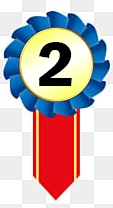
<style>
.page{position:relative;width:113px;height:208px}
.page>*{position:absolute;margin:0}
.t1{font:63.6px "FranklinGothic-DemiCond";color:#000000;scale:1.18 1}
</style>
<div class="page">
<p class="t1" style="left:39px;top:42px;width:33px;height:44px">2</p>
</div>
